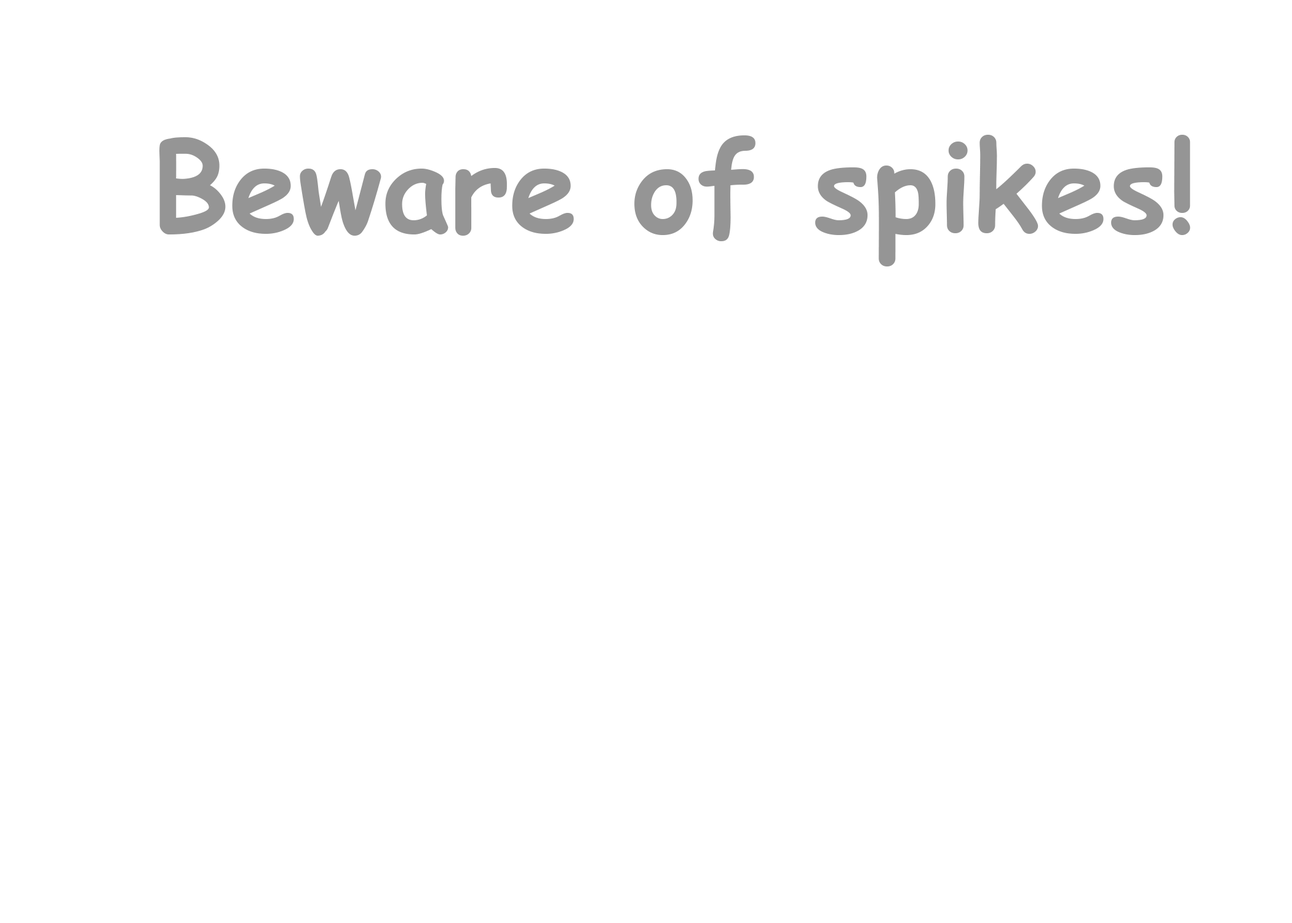
<style>
.page{position:relative;width:1292px;height:923px;background:#ffffff}
.page>*{position:absolute;margin:0}
.t1{font:123.1px "ComicSansMS-Bold";color:#959595}
</style>
<div class="page">
<p class="t1" style="left:159px;top:135px;width:1032px;height:131px">Beware of spikes!</p>
</div>
